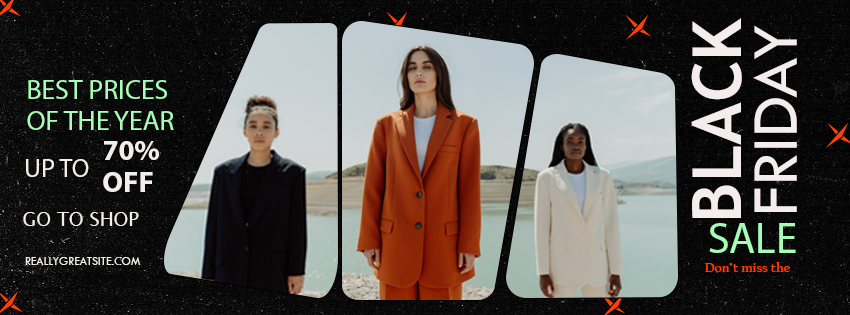
<style>
.page{position:relative;width:850px;height:315px}
.page>*{position:absolute;margin:0}
.t1{font:67.7px "TrebuchetMS-Bold";color:#f5ecec}
.t2{font:67.7px "TwCenMT-Regular";color:#f5ecec}
.t3{font:27.7px/31.1px "MyriadPro-Regular";color:#a8fcb8}
.t4{font:28.8px/32.3px "MyriadPro-Bold";color:#f5ecec}
.t5{font:25.9px "MyriadPro-Regular";color:#f5ecec}
.t6{font:18.9px "LucidaSansUnicode";color:#f5ecec}
.t7{font:43.2px "MyriadPro-Regular";color:#a8fcb8}
.t8{font:12.2px "TwCenMT-Regular";color:#f5ecec}
.t9{font:13.7px "CalifornianFB-Bold";color:#ff3b00}
</style>
<div class="page">
<p class="t1" style="left:691px;top:18px;width:51px;height:200px;rotate:-90deg">BLACK</p>
<p class="t2" style="left:753px;top:25px;width:44px;height:187px;rotate:-90deg">FRIDAY</p>
<p class="t3" style="left:27px;top:80px;width:147px;height:50px">BEST PRICES <br>OF THE YEAR</p>
<p class="t4" style="left:103px;top:141px;width:56px;height:51px">70%<br>OFF</p>
<p class="t5" style="left:26px;top:159px;width:63px;height:18px">UP TO</p>
<p class="t6" style="left:23px;top:212px;width:116px;height:14px">GO TO SHOP</p>
<p class="t7" style="left:709px;top:223px;width:87px;height:30px">SALE</p>
<p class="t8" style="left:25px;top:257px;width:116px;height:8px">REALLYGREATSITE.COM</p>
<p class="t9" style="left:705px;top:262px;width:85px;height:10px">Don’t miss the</p>
</div>
